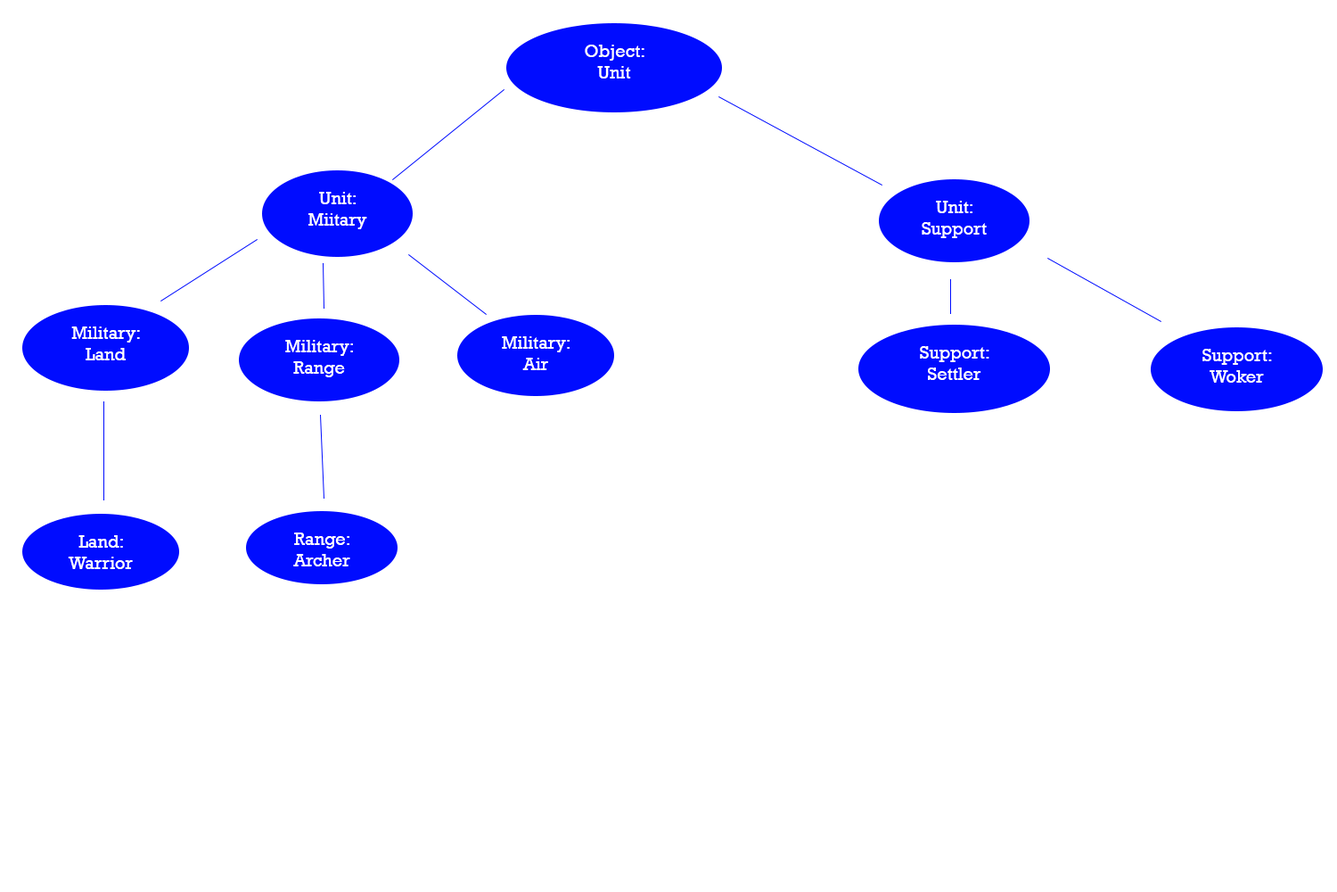
<style>
.page{position:relative;width:1337px;height:892px;background:#ffffff}
.page>*{position:absolute;margin:0}
.t1{font:17.8px "Rockwell";color:#ffffff}
</style>
<div class="page">
<p class="t1" style="left:585px;top:45px;width:60px;height:33px;text-align:center">Object:<br>Unit</p>
<p class="t1" style="left:308px;top:192px;width:59px;height:37px;text-align:center">Unit:<br>Miitary</p>
<p class="t1" style="left:922px;top:201px;width:65px;height:37px;text-align:center">Unit:<br>Support</p>
<p class="t1" style="left:71px;top:326px;width:69px;height:34px;text-align:center">Military:<br>Land</p>
<p class="t1" style="left:285px;top:340px;width:68px;height:37px;text-align:center">Military:<br>Range</p>
<p class="t1" style="left:502px;top:336px;width:68px;height:34px;text-align:center">Military:<br>Air</p>
<p class="t1" style="left:920px;top:346px;width:70px;height:34px;text-align:center">Support:<br>Settler</p>
<p class="t1" style="left:1203px;top:349px;width:69px;height:33px;text-align:center">Support:<br>Woker</p>
<p class="t1" style="left:293px;top:532px;width:57px;height:34px;text-align:center">Range:<br>Archer</p>
<p class="t1" style="left:68px;top:535px;width:65px;height:34px;text-align:center">Land:<br>Warrior</p>
</div>
